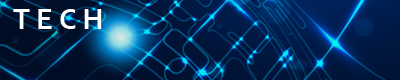
<style>
.page{position:relative;width:400px;height:80px}
.page>*{position:absolute;margin:0}
.t1{font:30px "Corbel-Bold";letter-spacing:0.2em;color:#ffffff;text-transform:uppercase}
</style>
<div class="page">
<p class="t1" style="left:13px;top:9px;width:89px;height:20px">TECH</p>
</div>
